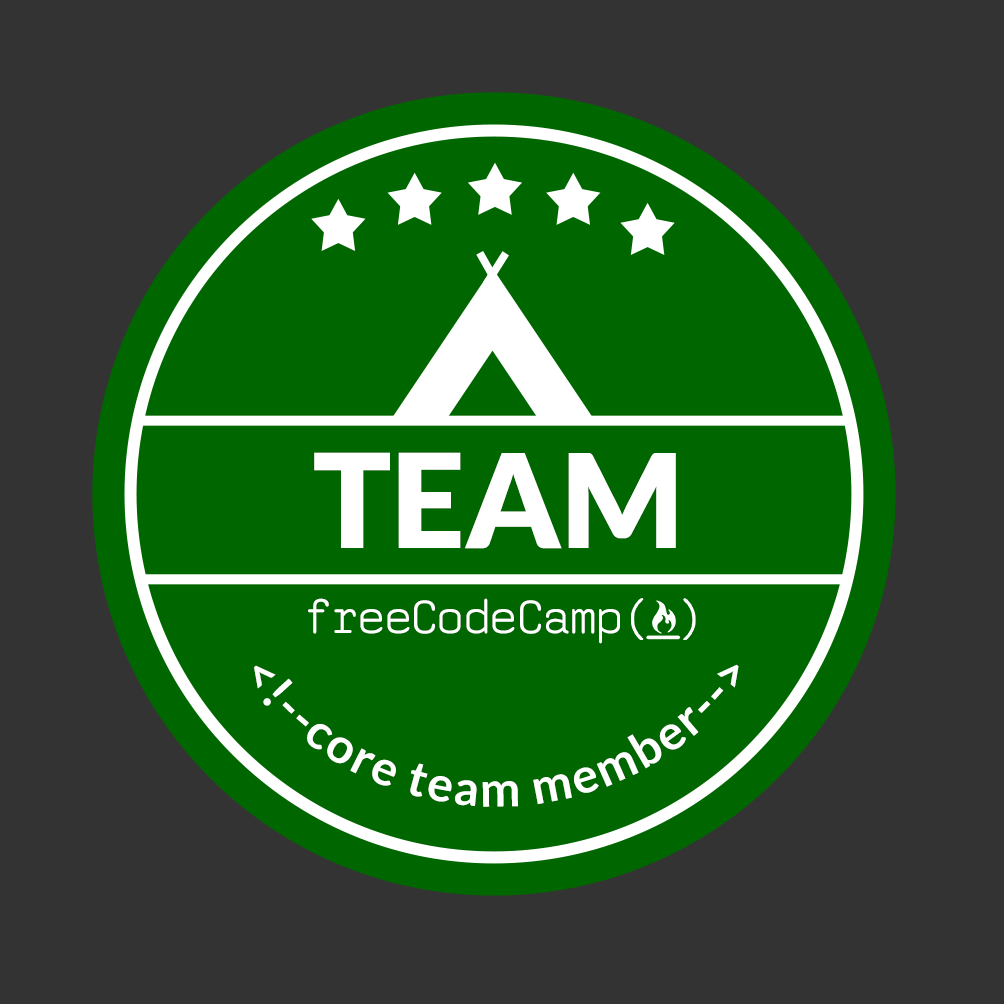
<style>
.page{position:relative;width:1004px;height:1004px;background:#333333}
.page>*{position:absolute;margin:0}
.t1{font:130.5px "Lato-Black";color:#ffffff}
.t2{font:48.2px "saxMono";color:#ffffff}
.t3{font:48.2px "Lato-Bold";letter-spacing:0.05em;color:#ffffff}
</style>
<div class="page">
<p class="t1" style="left:314px;top:452px;width:362px;height:97px">TEAM</p>
<p class="t2" style="left:308px;top:598px;width:312px;height:46px">freeCodeCamp</p>
<p class="t3" style="left:254px;top:664px;width:485px;height:143px;text-align:center">&lt;!--core team member--&gt;</p>
</div>
